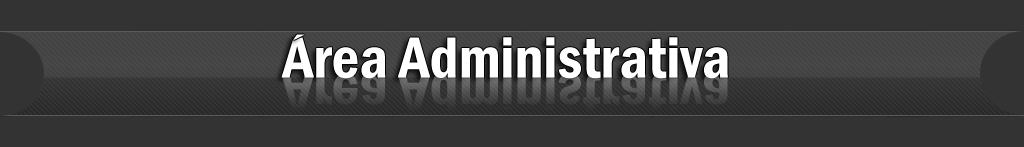
<style>
.page{position:relative;width:1024px;height:147px;background:#333333}
.page>*{position:absolute;margin:0}
.t1{font:60px "FranklinGothic-DemiCond";color:#ffffff}
.t2{font:32.4px "TimesNewRomanPSMT";color:#ffffff;scale:2.22 1}
.t3{font:60px "FranklinGothic-DemiCond"}
</style>
<div class="page">
<p class="t1" style="left:281px;top:37px;width:447px;height:42px">Area Administrativa</p>
<p class="t2" style="left:293px;top:34px;width:12px;height:6px">´</p>
<p class="t3" style="left:281px;top:73px;width:447px;height:42px">Area Administrativa</p>
</div>
